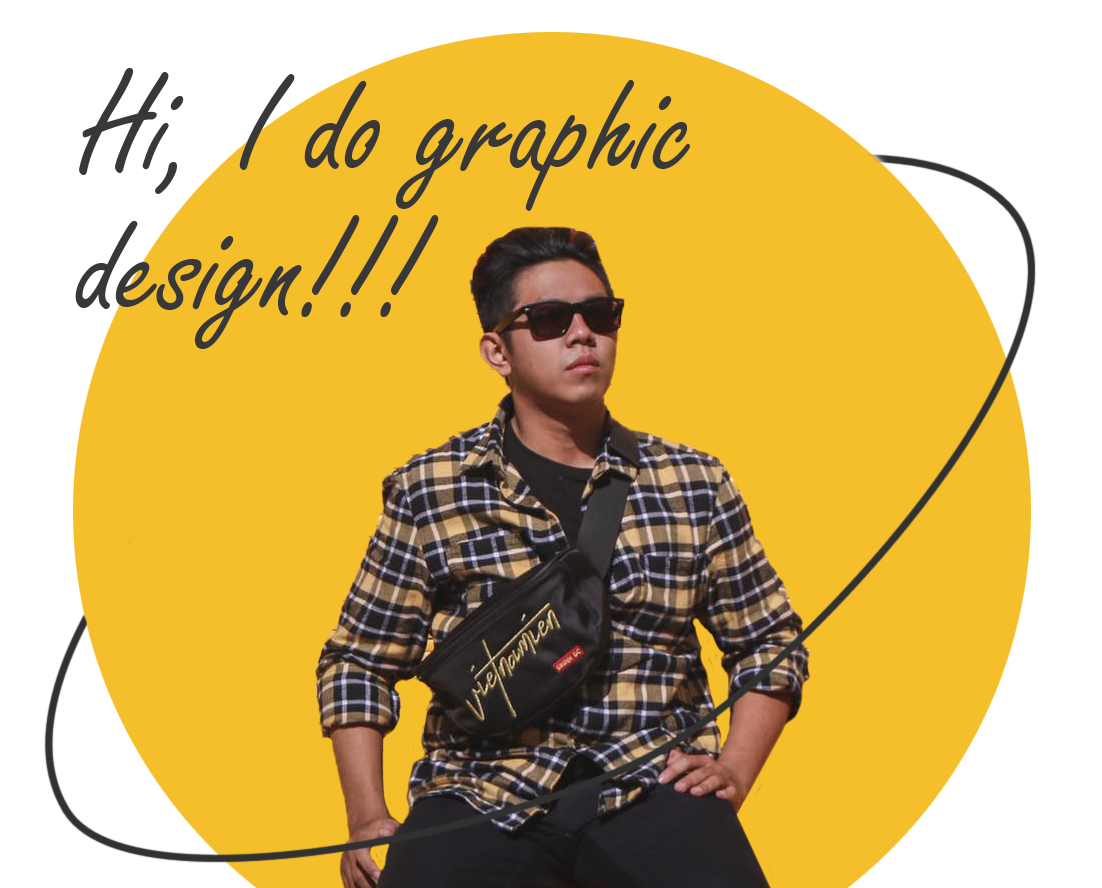
<style>
.page{position:relative;width:1102px;height:888px;background:#f5be2b}
.page>*{position:absolute;margin:0}
.t1{font:150px/140px "FreestyleScript-Regular";color:#383838}
</style>
<div class="page">
<p class="t1" style="left:75px;top:68px;width:616px;height:281px;text-align:right">Hi, I do graphic design!!!</p>
</div>
